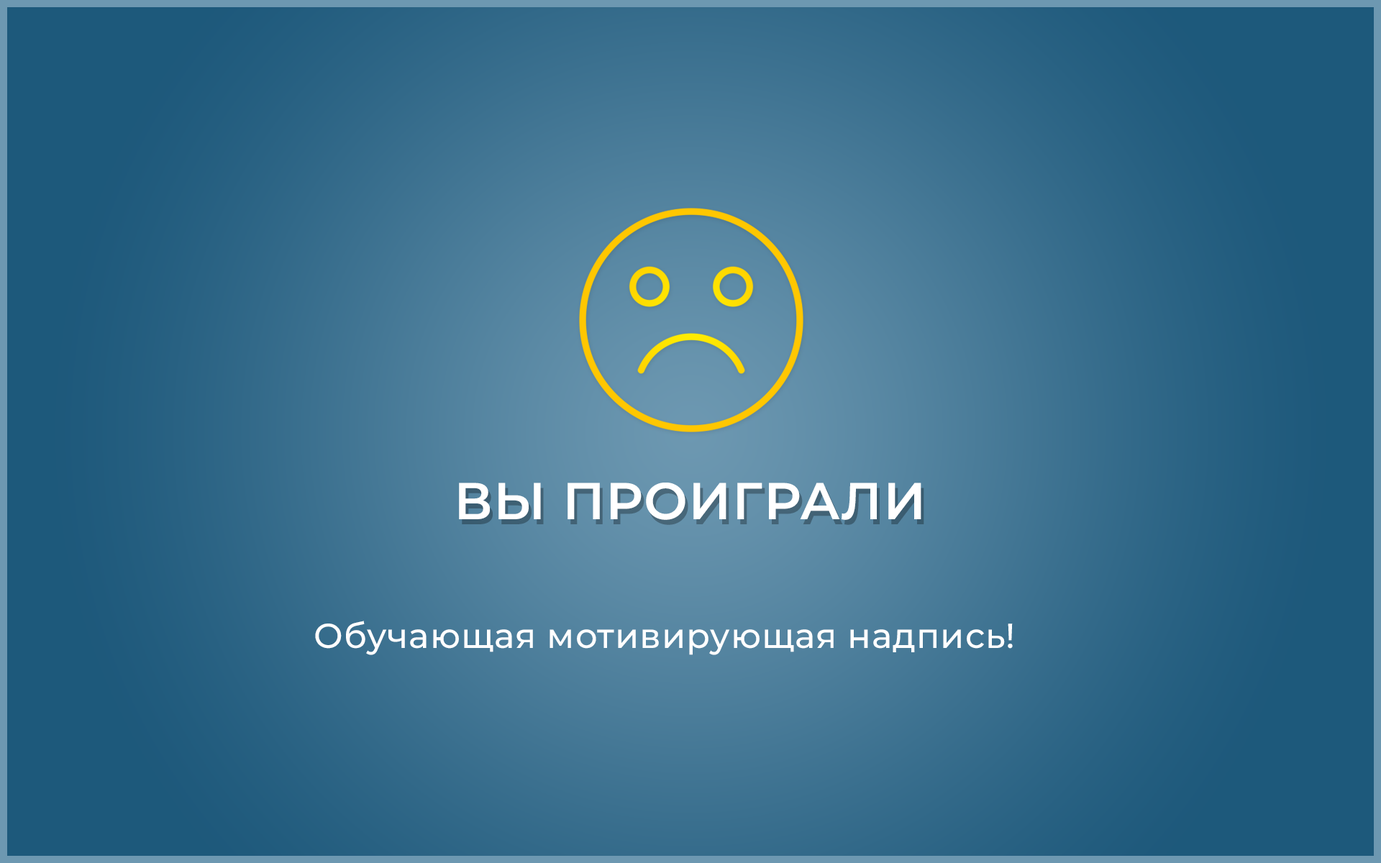
<style>
.page{position:relative;width:1381px;height:863px}
.page>*{position:absolute;margin:0}
.t1{font:51.8px "Montserrat-SemiBold";letter-spacing:0.02em;color:#ffffff;text-transform:uppercase}
.t2{font:34.5px "Montserrat-Medium";letter-spacing:0.02em;color:#ffffff}
</style>
<div class="page">
<p class="t1" style="left:459px;top:483px;width:463px;height:37px">Вы проиграли</p>
<p class="t2" style="left:315px;top:621px;width:698px;height:34px">Обучающая мотивирующая надпись!</p>
</div>
